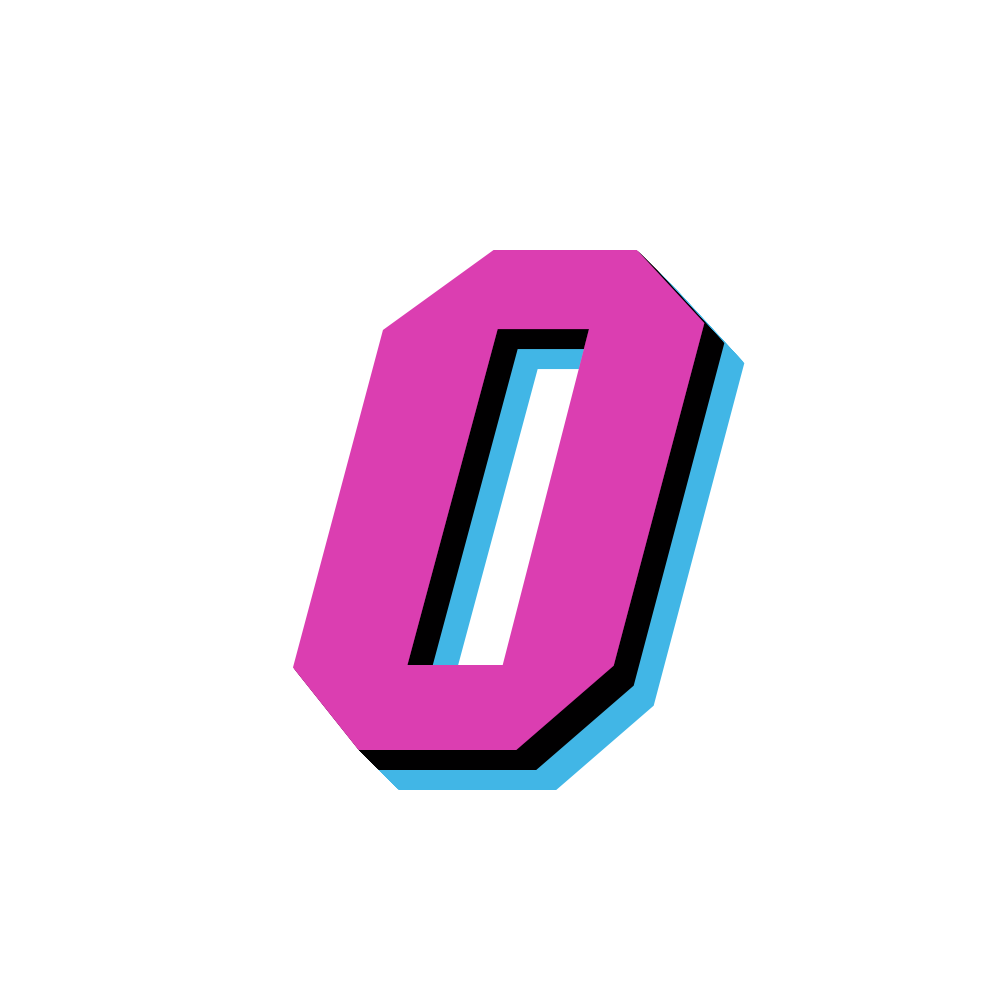
<style>
.page{position:relative;width:1000px;height:1000px;background:#ffffff}
.page>*{position:absolute;margin:0}
.t1{font:625px "NBAHeat";color:#db3eb1}
</style>
<div class="page">
<p class="t1" style="left:293px;top:250px;width:412px;height:500px">0</p>
</div>
